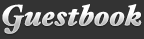
<style>
.page{position:relative;width:144px;height:39px;background:#333333}
.page>*{position:absolute;margin:0}
.t1{font:29px "HoeflerText-Black-Italic-Swash"}
</style>
<div class="page">
<p class="t1" style="left:2px;top:4px;width:140px;height:30px">Guestbook</p>
</div>
